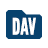
<style>
.page{position:relative;width:48px;height:48px;background:#ffffff}
.page>*{position:absolute;margin:0}
.t1{font:22.8px "LeagueGothic-Regular";color:#ffffff}
</style>
<div class="page">
<p class="t1" style="left:12px;top:17px;width:24px;height:18px">DAV</p>
</div>
